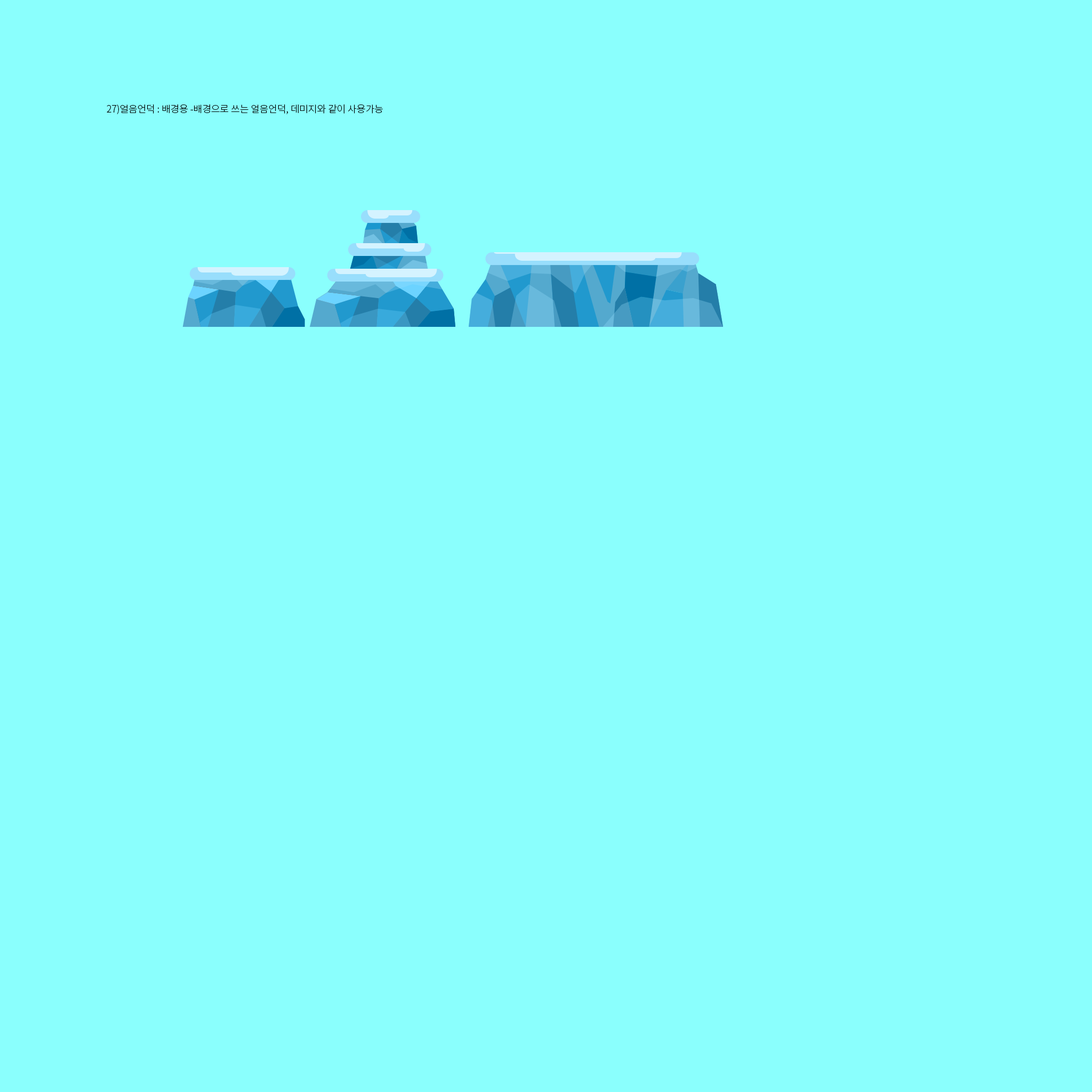
<style>
.page{position:relative;width:1092px;height:1092px;background:#8afffd}
.page>*{position:absolute;margin:0}
.t1{font:9.6px "NotoSansCJKkr-Light";color:#000000}
</style>
<div class="page">
<p class="t1" style="left:107px;top:104px;width:276px;height:11px">27)얼음언덕 : 배경용 -배경으로 쓰는 얼음언덕, 데미지와 같이 사용가능</p>
</div>
